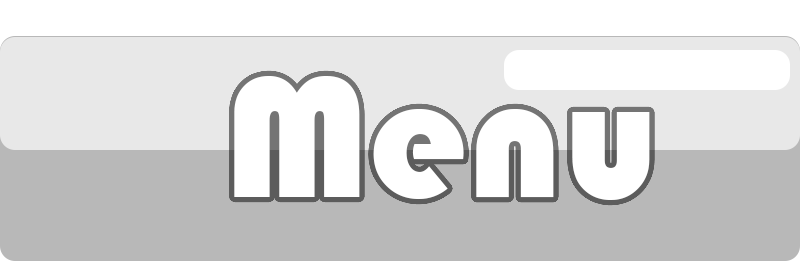
<style>
.page{position:relative;width:800px;height:261px;background:#ffffff}
.page>*{position:absolute;margin:0}
.t1{font:177px "Bauhaus93";color:#ffffff}
</style>
<div class="page">
<p class="t1" style="left:234px;top:76px;width:416px;height:124px">Menu</p>
</div>
